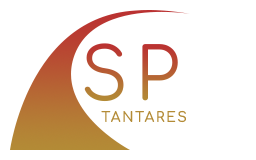
<style>
.page{position:relative;width:256px;height:160px;background:#ffffff}
.page>*{position:absolute;margin:0}
.t1{font:14px "Comfortaa-Bold";letter-spacing:0.1em;color:#b38b36}
</style>
<div class="page">
<p class="t1" style="left:101px;top:110px;width:85px;height:13px">TANTARES</p>
</div>
